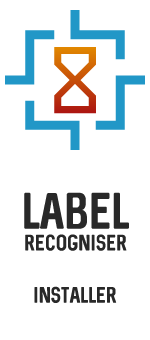
<style>
.page{position:relative;width:150px;height:340px;background:#ffffff}
.page>*{position:absolute;margin:0}
.t1{font:18px "Sequel-Regular";color:#282828}
.t2{font:41px "Sequel-Regular";color:#282828}
</style>
<div class="page">
<p class="t1" style="left:24px;top:192px;width:105px;height:59px;text-align:center"><span class="t2">Label<br></span>Recogniser</p>
<p class="t1" style="left:34px;top:286px;width:83px;height:17px">Installer</p>
</div>
